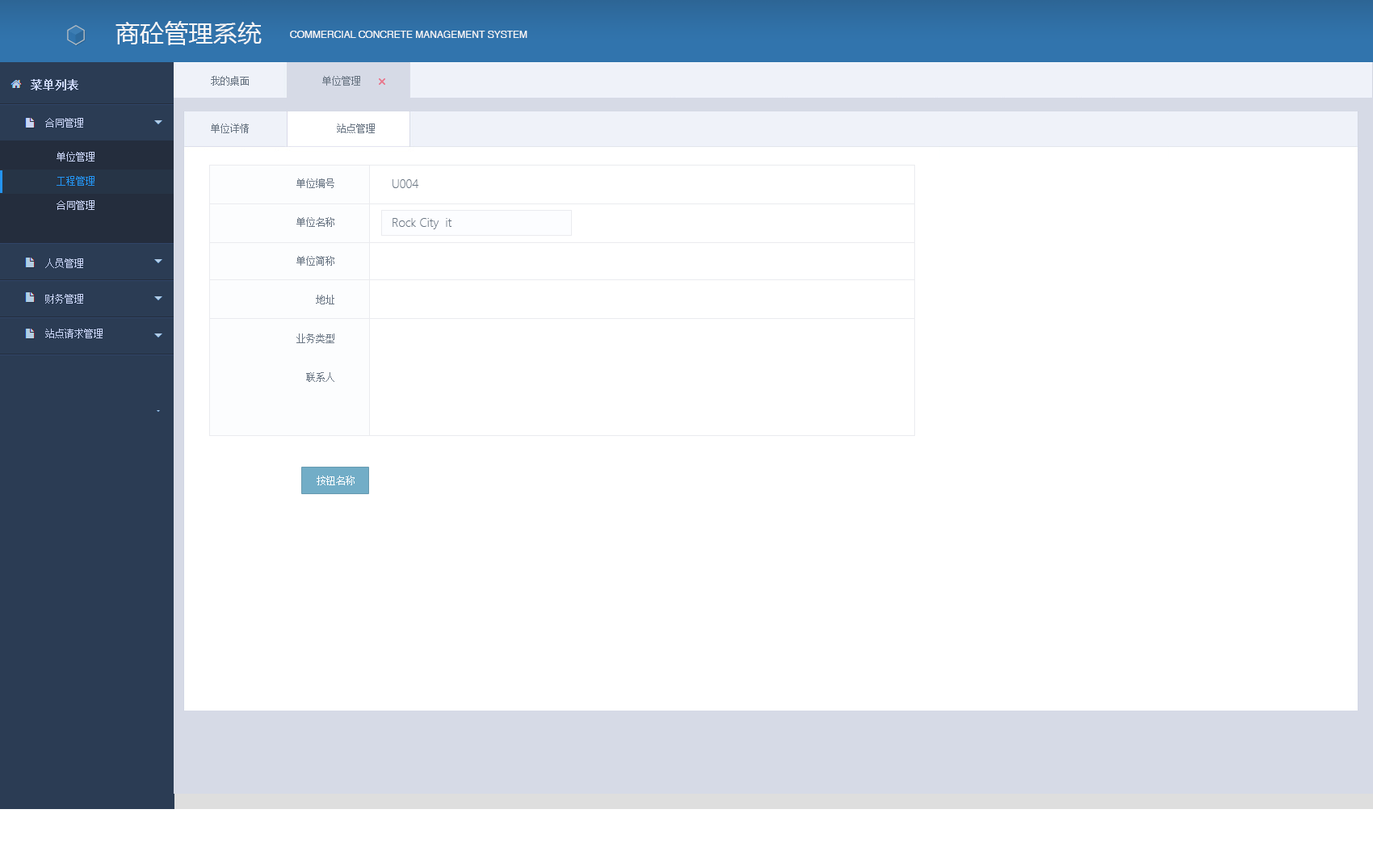
<style>
.page{position:relative;width:1373px;height:868px;background:#ffffff}
.page>*{position:absolute;margin:0}
.t1{font:24.4px "MicrosoftYaHei";color:#f6f6f6}
.t2{font:9.7px "Helvetica";color:#f6f6f6;text-transform:uppercase}
.t3{font:9.7px "SimSun";color:#6a7684;text-transform:uppercase}
.t4{font:11.3px "SimSun";color:#c9d4f6;font-weight:bold}
.t5{font:9.7px/35.1px "SimSun";color:#c9d4f6}
.t6{font:9.7px "SimSun";color:#6a7684}
.t7{font:9.7px/24.2px "SimSun";color:#c9d4f6}
.t8{font:9.7px/24.2px "SimSun";color:#2494f2}
.t9{font:9.7px/38.8px "SimSun";color:#6a7684;text-transform:uppercase}
.t10{font:11.3px/38.8px "MicrosoftYaHeiLight";color:#6a7684}
.t11{font:11.3px/38.8px "MicrosoftYaHeiLight";color:#6a7684;text-transform:uppercase}
.t12{font:9.7px "SimSun";color:#ffffff}
</style>
<div class="page">
<p class="t1" style="left:116px;top:21px;width:146px;height:24px">商砼管理系统</p>
<p class="t2" style="left:290px;top:31px;width:237px;height:7px">Commercial concrete management system</p>
<p class="t3" style="left:211px;top:76px;width:149px;height:10px">我的桌面               单位管理</p>
<p class="t4" style="left:31px;top:79px;width:47px;height:11px">菜单列表</p>
<p class="t5" style="left:45px;top:118px;width:58px;height:220px">合同管理<br><br><br><br>人员管理<br>财务管理<br>站点请求管理</p>
<p class="t6" style="left:211px;top:124px;width:164px;height:9px">单位详情                  站点管理</p>
<p class="t7" style="left:57px;top:152px;width:38px;height:58px">单位管理<br><span class="t8">工程管理<br></span>合同管理</p>
<p class="t9" style="left:296px;top:179px;width:38px;height:203px;text-align:right">单位编号<br>单位名称<br>单位简称<br>地址<br>业务类型<br>联系人</p>
<p class="t10" style="left:393px;top:179px;width:59px;height:50px"><span class="t11">U004<br></span>Rock City  it</p>
<p class="t12" style="left:317px;top:476px;width:38px;height:9px">按钮名称</p>
</div>
